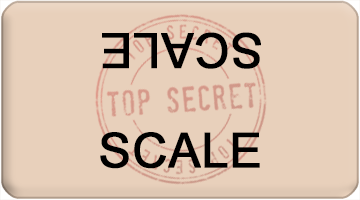
<style>
.page{position:relative;width:360px;height:200px;background:#e8d0bb}
.page>*{position:absolute;margin:0}
.t1{font:48px "ArialMT";color:#000000;font-weight:bold}
</style>
<div class="page">
<p class="t1" style="left:102px;top:32px;width:159px;height:37px;rotate:180deg">SCALE</p>
<p class="t1" style="left:100px;top:132px;width:160px;height:37px">SCALE</p>
</div>
